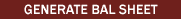
<style>
.page{position:relative;width:181px;height:19px;background:#6f201c}
.page>*{position:absolute;margin:0}
.t1{font:14px "FranklinGothic-Medium";color:#ffffff}
</style>
<div class="page">
<p class="t1" style="left:24px;top:4px;width:134px;height:11px">GENERATE BAL SHEET</p>
</div>
